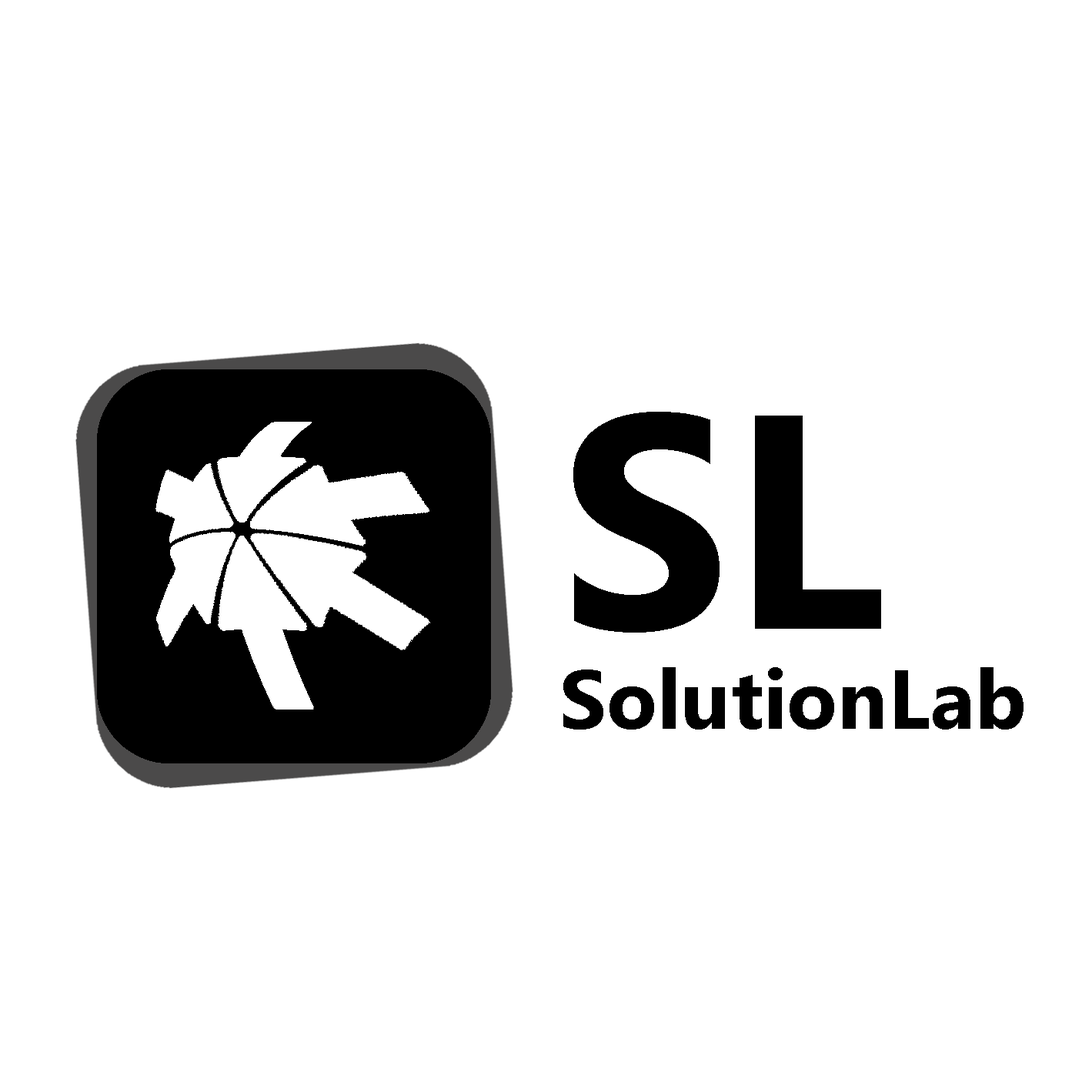
<style>
.page{position:relative;width:1092px;height:1092px;background:#ffffff}
.page>*{position:absolute;margin:0}
.t1{font:83.1px "Gadugi-Bold";color:#000000}
.t2{font:304.7px "Gadugi-Bold";color:#000000}
</style>
<div class="page">
<p class="t1" style="left:563px;top:412px;width:460px;height:318px"><span class="t2">SL<br></span>SolutionLab</p>
</div>
